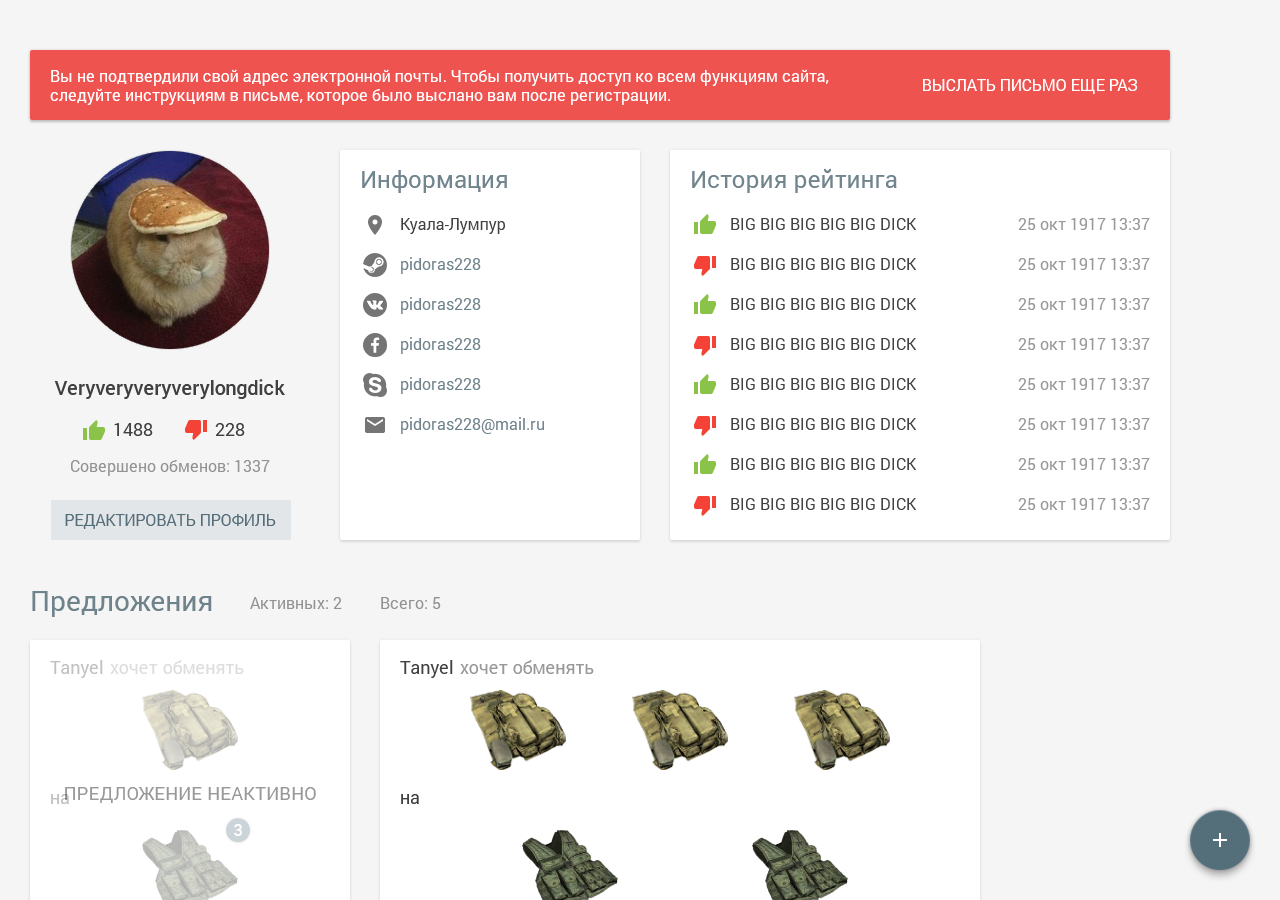
<style>
.page{position:relative;width:1280px;height:900px;background:#ffffff}
.page>*{position:absolute;margin:0}
.t1{font:16px "Roboto-Regular";color:#ffffff}
.t2{font:16px "Roboto-Regular";color:#ffffff;text-transform:uppercase}
.t3{font:24px "Roboto-Regular";color:#71858f}
.t4{font:16px "Roboto-Regular";color:#424242}
.t5{font:16px "Roboto-Regular";color:#999999}
.t6{font:16px "Roboto-Regular";color:#71858f}
.t7{font:20px "Roboto-Medium";color:#404040}
.t8{font:18px "Roboto-Regular";color:#404040}
.t9{font:16px "Roboto-Regular";color:#939393}
.t10{font:16px "Roboto-Regular";color:#546e7a;text-transform:uppercase}
.t11{font:28px "Roboto-Regular";color:#6f838d}
.t12{font:18px "Roboto-Regular";color:#c1c1c1}
.t13{font:18px "Roboto-Regular";color:#dddddd}
.t14{font:18px "Roboto-Regular";color:#424242}
.t15{font:18px "Roboto-Regular";color:#999999}
.t16{font:18px "Roboto-Regular";color:#999999;text-transform:uppercase}
.t17{font:16px "Roboto-Medium";color:#ffffff}
</style>
<div class="page">
<p class="t1" style="left:50px;top:69px;width:779px;height:36px">Вы не подтвердили свой адрес электронной почты. Чтобы получить доступ ко всем функциям сайта, следуйте инструкциям в письме, которое было выслано вам после регистрации.</p>
<p class="t2" style="left:923px;top:79px;width:215px;height:15px">Выслать письмо еще раз</p>
<p class="t3" style="left:362px;top:170px;width:145px;height:23px">Информация</p>
<p class="t3" style="left:692px;top:168px;width:205px;height:25px">История рейтинга</p>
<p class="t4" style="left:401px;top:218px;width:104px;height:16px">Куала-Лумпур</p>
<p class="t4" style="left:731px;top:218px;width:186px;height:12px">BIG BIG BIG BIG BIG DICK</p>
<p class="t5" style="left:1018px;top:218px;width:132px;height:12px">25 окт 1917 13:37</p>
<p class="t6" style="left:401px;top:257px;width:80px;height:17px">pidoras228</p>
<p class="t4" style="left:731px;top:258px;width:186px;height:12px">BIG BIG BIG BIG BIG DICK</p>
<p class="t5" style="left:1018px;top:258px;width:132px;height:12px">25 окт 1917 13:37</p>
<p class="t6" style="left:401px;top:297px;width:80px;height:17px">pidoras228</p>
<p class="t4" style="left:731px;top:298px;width:186px;height:12px">BIG BIG BIG BIG BIG DICK</p>
<p class="t5" style="left:1018px;top:298px;width:132px;height:12px">25 окт 1917 13:37</p>
<p class="t6" style="left:401px;top:337px;width:80px;height:17px">pidoras228</p>
<p class="t4" style="left:731px;top:338px;width:186px;height:12px">BIG BIG BIG BIG BIG DICK</p>
<p class="t5" style="left:1018px;top:338px;width:132px;height:12px">25 окт 1917 13:37</p>
<p class="t6" style="left:401px;top:377px;width:80px;height:17px">pidoras228</p>
<p class="t7" style="left:54px;top:379px;width:231px;height:20px">Veryveryveryverylongdick</p>
<p class="t4" style="left:731px;top:378px;width:186px;height:12px">BIG BIG BIG BIG BIG DICK</p>
<p class="t5" style="left:1018px;top:378px;width:132px;height:12px">25 окт 1917 13:37</p>
<p class="t8" style="left:114px;top:423px;width:39px;height:13px">1488</p>
<p class="t8" style="left:215px;top:423px;width:30px;height:13px">228</p>
<p class="t6" style="left:401px;top:417px;width:143px;height:17px">pidoras228@mail.ru</p>
<p class="t4" style="left:731px;top:418px;width:186px;height:12px">BIG BIG BIG BIG BIG DICK</p>
<p class="t5" style="left:1018px;top:418px;width:132px;height:12px">25 окт 1917 13:37</p>
<p class="t9" style="left:71px;top:460px;width:199px;height:16px">Совершено обменов: 1337</p>
<p class="t4" style="left:731px;top:458px;width:186px;height:12px">BIG BIG BIG BIG BIG DICK</p>
<p class="t5" style="left:1018px;top:458px;width:132px;height:12px">25 окт 1917 13:37</p>
<p class="t4" style="left:731px;top:498px;width:186px;height:12px">BIG BIG BIG BIG BIG DICK</p>
<p class="t5" style="left:1018px;top:498px;width:132px;height:12px">25 окт 1917 13:37</p>
<p class="t10" style="left:65px;top:514px;width:211px;height:15px">Редактировать профиль</p>
<p class="t11" style="left:32px;top:591px;width:180px;height:26px">Предложения</p>
<p class="t9" style="left:250px;top:597px;width:92px;height:12px">Активных: 2</p>
<p class="t9" style="left:381px;top:597px;width:60px;height:12px">Всего: 5</p>
<p class="t12" style="left:50px;top:660px;width:53px;height:18px">Tanyel</p>
<p class="t13" style="left:110px;top:660px;width:134px;height:14px">хочет обменять</p>
<p class="t14" style="left:400px;top:660px;width:53px;height:18px">Tanyel</p>
<p class="t15" style="left:460px;top:660px;width:134px;height:14px">хочет обменять</p>
<p class="t12" style="left:51px;top:794px;width:18px;height:10px">на</p>
<p class="t16" style="left:65px;top:787px;width:251px;height:16px">Предложение неактивно</p>
<p class="t14" style="left:401px;top:794px;width:18px;height:10px">на</p>
<p class="t17" style="left:234px;top:824px;width:8px;height:12px">3</p>
</div>
